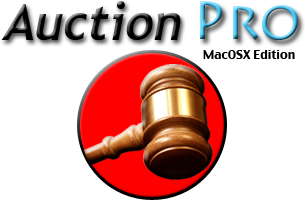
<style>
.page{position:relative;width:305px;height:200px;background:#ffffff}
.page>*{position:absolute;margin:0}
.t1{font:50px "Trebuchet-BoldItalic";color:#000000}
.t2{font:55px "LithosPro-Regular"}
.t3{font:12px "CharcoalCY";color:#000000}
</style>
<div class="page">
<p class="t1" style="left:1px;top:1px;width:180px;height:39px">Auction</p>
<p class="t2" style="left:200px;top:1px;width:98px;height:39px">Pro</p>
<p class="t3" style="left:203px;top:50px;width:92px;height:9px">MacOSX Edition</p>
</div>
